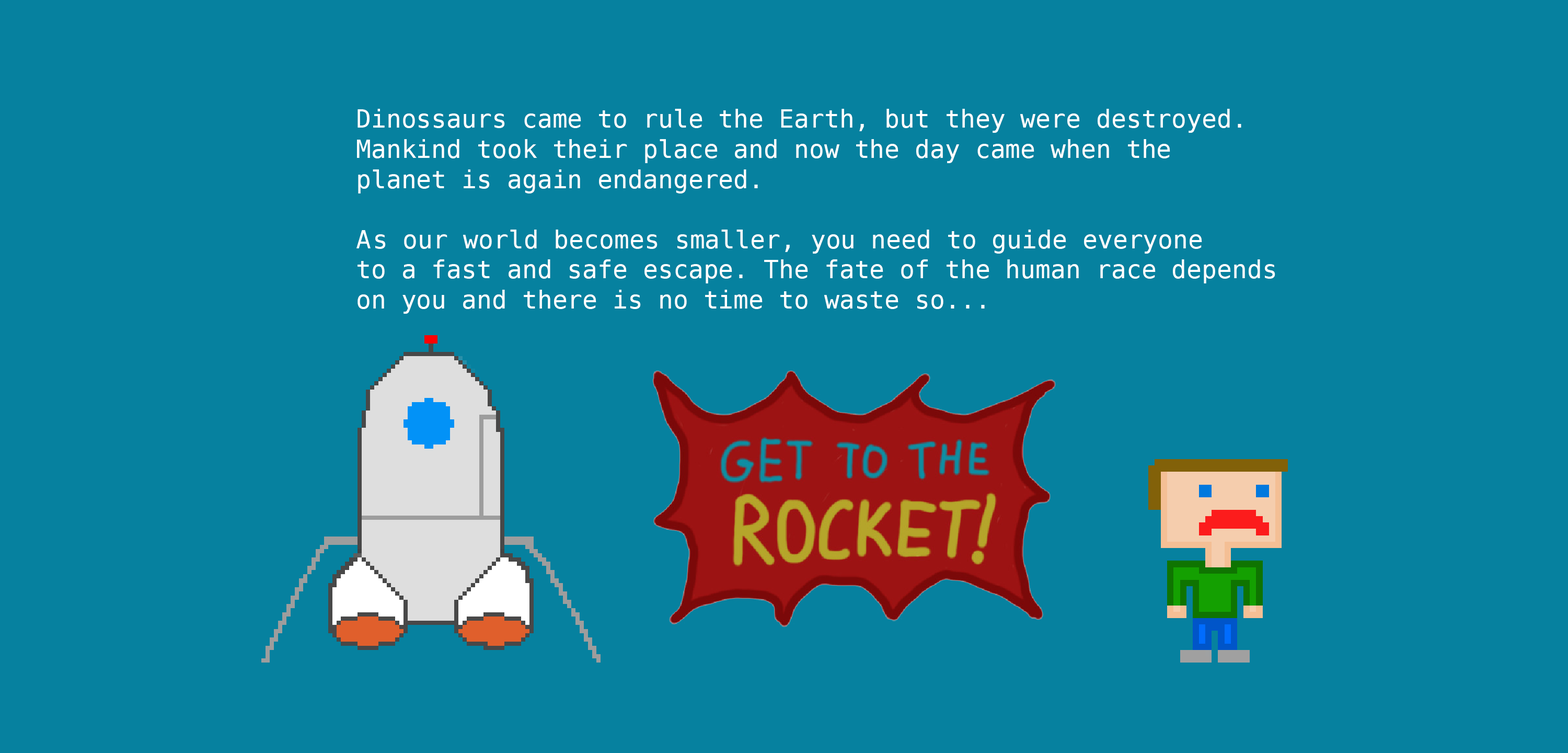
<style>
.page{position:relative;width:1568px;height:753px;background:#06819f}
.page>*{position:absolute;margin:0}
.t1{font:25.1px "DejaVuSansMono";color:#ffffff}
</style>
<div class="page">
<p class="t1" style="left:356px;top:109px;width:919px;height:205px">Dinossaurs came to rule the Earth, but they were destroyed.<br>Mankind took their place and now the day came when the<br>planet is again endangered. <br><br>As our world becomes smaller, you need to guide everyone <br>to a fast and safe escape. The fate of the human race depends<br>on you and there is no time to waste so...</p>
</div>
